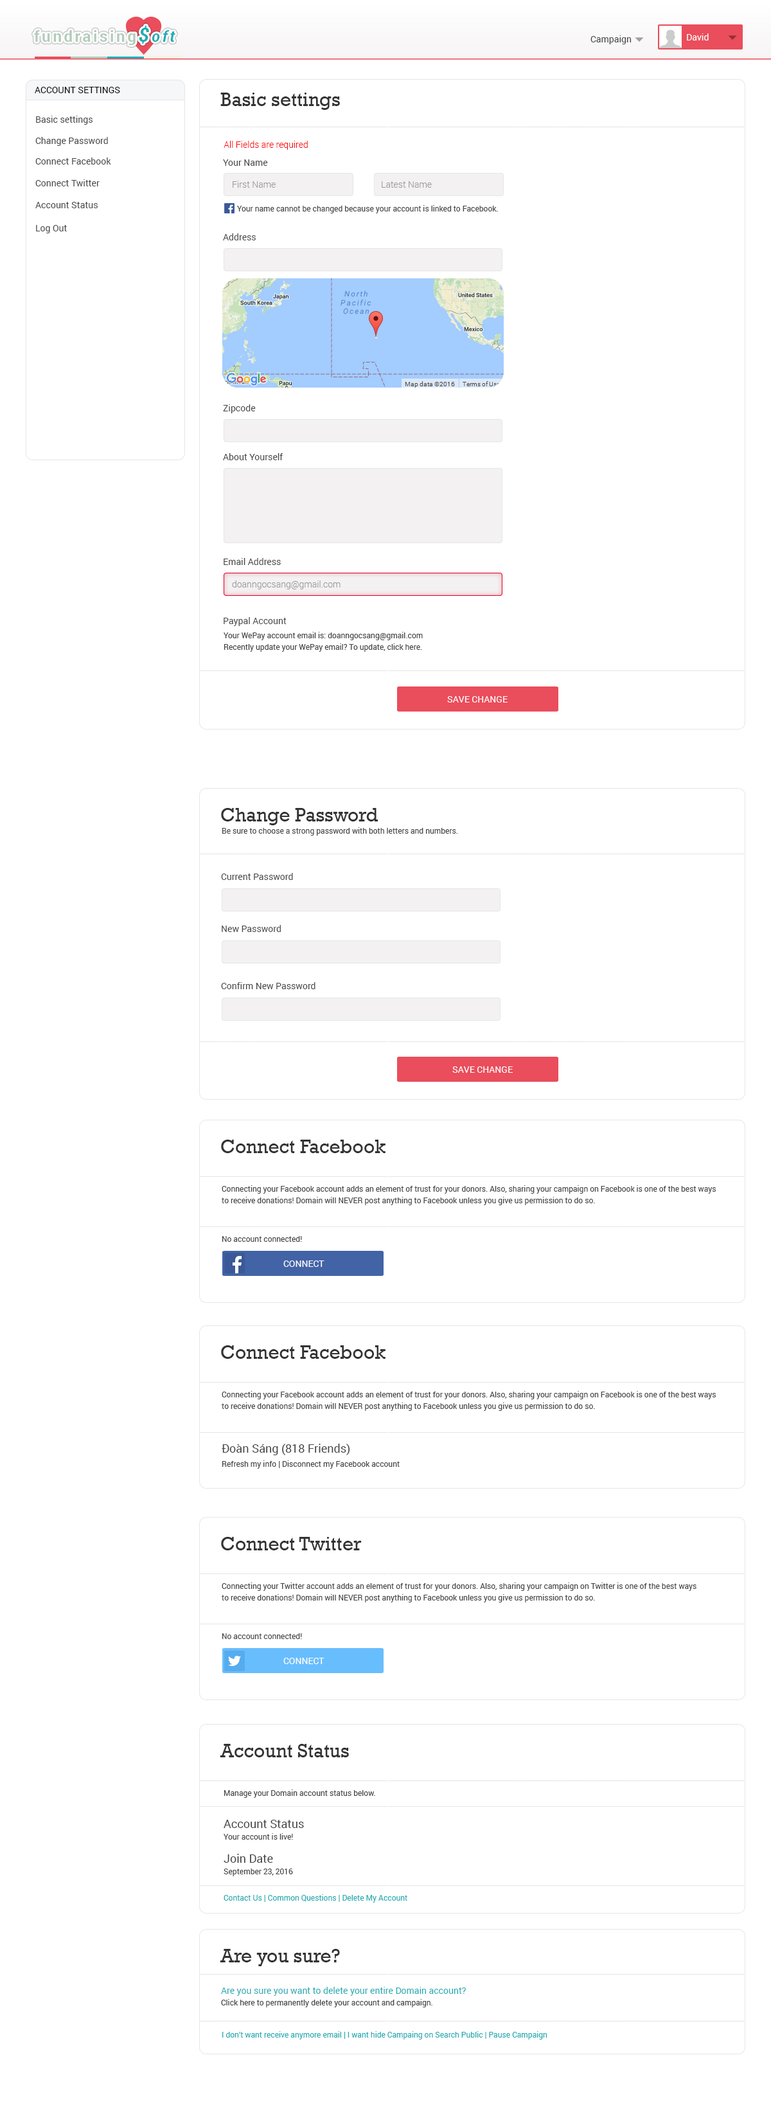
<style>
.page{position:relative;width:771px;height:2125px;background:#ffffff}
.page>*{position:absolute;margin:0}
.t1{font:15.4px "Roboto-Bold";letter-spacing:0.15em;color:#b2ccba}
.t2{font:19.3px "Roboto-BoldItalic";letter-spacing:0.15em;color:#23acb4}
.t3{font:15.4px "Roboto-BoldItalic";letter-spacing:0.15em;color:#23acb4}
.t4{font:9px "Roboto-Regular";color:#464646}
.t5{font:9px "Roboto-Regular";color:#ffffff}
.t6{font:9px "Roboto-Regular";color:#000000}
.t7{font:19.3px "Rockwell";color:#333333}
.t8{font:9px "Roboto-Light";color:#ff0000}
.t9{font:9px "Roboto-Light";color:#9b9999}
.t10{font:7.7px "Roboto-Regular";color:#464646}
.t11{font:7.7px/11.6px "Roboto-Regular";color:#464646}
.t12{font:9px "Roboto-Regular";color:#ffffff;text-transform:uppercase}
.t13{font:11.6px "Roboto-Regular";color:#464646}
.t14{font:11.6px/11.6px "Roboto-Regular";color:#464646}
.t15{font:7.7px "Roboto-Regular";color:#23acb4}
.t16{font:9px/11.6px "Roboto-Regular";color:#23acb4}
</style>
<div class="page">
<p class="t1" style="left:34px;top:26px;width:142px;height:19px">fundraising<span class="t2">$</span><span class="t3">oft</span></p>
<p class="t4" style="left:591px;top:35px;width:41px;height:9px">Campaign</p>
<p class="t5" style="left:687px;top:33px;width:22px;height:7px">David</p>
<p class="t6" style="left:35px;top:87px;width:85px;height:6px">ACCOUNT SETTINGS</p>
<p class="t7" style="left:221px;top:93px;width:119px;height:17px">Basic settings</p>
<p class="t4" style="left:36px;top:116px;width:57px;height:9px">Basic settings</p>
<p class="t4" style="left:35px;top:137px;width:73px;height:9px">Change Password</p>
<p class="t8" style="left:224px;top:141px;width:84px;height:9px">All Fields are required</p>
<p class="t4" style="left:35px;top:158px;width:76px;height:7px">Connect Facebook</p>
<p class="t4" style="left:223px;top:159px;width:45px;height:7px">Your Name</p>
<p class="t4" style="left:35px;top:179px;width:65px;height:7px">Connect Twitter</p>
<p class="t9" style="left:233px;top:181px;width:43px;height:7px">First Name</p>
<p class="t9" style="left:382px;top:181px;width:50px;height:7px">Latest Name</p>
<p class="t4" style="left:35px;top:202px;width:63px;height:6px">Account Status</p>
<p class="t10" style="left:237px;top:205px;width:261px;height:8px">Your name cannot be changed because your account is linked to Facebook.</p>
<p class="t4" style="left:36px;top:225px;width:31px;height:8px">Log Out</p>
<p class="t4" style="left:223px;top:233px;width:33px;height:7px">Address</p>
<p class="t4" style="left:223px;top:404px;width:33px;height:9px">Zipcode</p>
<p class="t4" style="left:223px;top:453px;width:61px;height:7px">About Yourself</p>
<p class="t4" style="left:224px;top:558px;width:57px;height:7px">Email Address</p>
<p class="t9" style="left:232px;top:580px;width:109px;height:10px">doanngocsang@gmail.com</p>
<p class="t4" style="left:224px;top:617px;width:63px;height:9px">Paypal Account</p>
<p class="t11" style="left:224px;top:632px;width:199px;height:20px">Your WePay account email is: doanngocsang@gmail.com<br>Recently update your WePay email? To update, click here.</p>
<p class="t12" style="left:447px;top:696px;width:61px;height:7px">save change</p>
<p class="t7" style="left:221px;top:808px;width:158px;height:17px">Change Password</p>
<p class="t10" style="left:222px;top:827px;width:236px;height:9px">Be sure to choose a strong password with both letters and numbers.</p>
<p class="t4" style="left:221px;top:873px;width:72px;height:7px">Current Password</p>
<p class="t4" style="left:222px;top:925px;width:59px;height:7px">New Password</p>
<p class="t4" style="left:221px;top:982px;width:95px;height:7px">Confirm New Password</p>
<p class="t12" style="left:453px;top:1066px;width:60px;height:7px">save change</p>
<p class="t7" style="left:221px;top:1140px;width:165px;height:13px">Connect Facebook</p>
<p class="t11" style="left:222px;top:1185px;width:494px;height:20px">Connecting your Facebook account adds an element of trust for your donors. Also, sharing your campaign on Facebook is one of the best ways <br>to receive donations! Domain will NEVER post anything to Facebook unless you give us permission to do so.</p>
<p class="t10" style="left:222px;top:1236px;width:80px;height:6px">No account connected!</p>
<p class="t12" style="left:284px;top:1261px;width:41px;height:6px">connect</p>
<p class="t7" style="left:221px;top:1346px;width:165px;height:13px">Connect Facebook</p>
<p class="t11" style="left:222px;top:1391px;width:494px;height:20px">Connecting your Facebook account adds an element of trust for your donors. Also, sharing your campaign on Facebook is one of the best ways <br>to receive donations! Domain will NEVER post anything to Facebook unless you give us permission to do so.</p>
<p class="t13" style="left:222px;top:1444px;width:128px;height:11px">Đoàn Sáng (818 Friends)</p>
<p class="t10" style="left:222px;top:1461px;width:178px;height:8px">Refresh my info | Disconnect my Facebook account</p>
<p class="t7" style="left:221px;top:1537px;width:141px;height:14px">Connect Twitter</p>
<p class="t11" style="left:222px;top:1583px;width:475px;height:20px">Connecting your Twitter account adds an element of trust for your donors. Also, sharing your campaign on Twitter is one of the best ways <br>to receive donations! Domain will NEVER post anything to Facebook unless you give us permission to do so.</p>
<p class="t10" style="left:222px;top:1634px;width:80px;height:5px">No account connected!</p>
<p class="t12" style="left:284px;top:1658px;width:41px;height:6px">connect</p>
<p class="t7" style="left:220px;top:1744px;width:129px;height:14px">Account Status</p>
<p class="t10" style="left:224px;top:1790px;width:151px;height:8px">Manage your Domain account status below.</p>
<p class="t11" style="left:224px;top:1820px;width:80px;height:57px"><span class="t14">Account Status<br></span>Your account is live!<br><br><span class="t14">Join Date<br></span>September 23, 2016</p>
<p class="t15" style="left:224px;top:1895px;width:184px;height:8px">Contact Us | Common Questions | Delete My Account</p>
<p class="t7" style="left:220px;top:1949px;width:120px;height:18px">Are you sure?</p>
<p class="t16" style="left:221px;top:1987px;width:245px;height:21px">Are you sure you want to delete your entire Domain account?<br><span class="t11">Click here to permanently delete your account and campaign.</span></p>
<p class="t15" style="left:222px;top:2031px;width:326px;height:9px">I don’t want receive anymore email | I want hide Campaing on Search Public | Pause Campaign</p>
</div>
